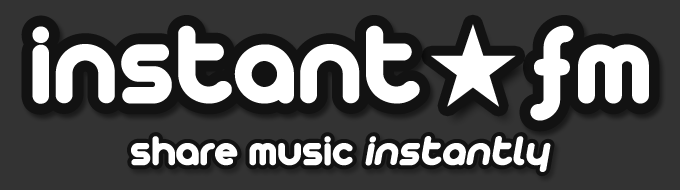
<style>
.page{position:relative;width:680px;height:190px;background:#333333}
.page>*{position:absolute;margin:0}
.t1{font:120px "Arista2.0";letter-spacing:-0.025em;color:#ffffff;font-weight:bold}
.t2{font:104px "AdobeFanHeitiStd-Bold";letter-spacing:0.025em;color:#ffffff}
.t3{font:45px "Arista2.0Fat";letter-spacing:-0.025em;font-weight:bold}
.t4{font:45px "Arista2.0Fat";letter-spacing:-0.025em;font-weight:bold;font-style:italic}
.t5{font:45px "Arista2.0";letter-spacing:-0.025em;color:#ffffff;font-weight:bold}
.t6{font:45px "Arista2.0";letter-spacing:-0.025em;color:#ffffff;font-weight:bold;font-style:italic}
</style>
<div class="page">
<p class="t1" style="left:32px;top:25px;width:617px;height:96px">instant    fm</p>
<p class="t2" style="left:431px;top:24px;width:85px;height:83px">★</p>
<p class="t3" style="left:127px;top:132px;width:428px;height:45px">share music <span class="t4">instantly</span></p>
<p class="t5" style="left:131px;top:136px;width:420px;height:36px">share music <span class="t6">instantly</span></p>
</div>
